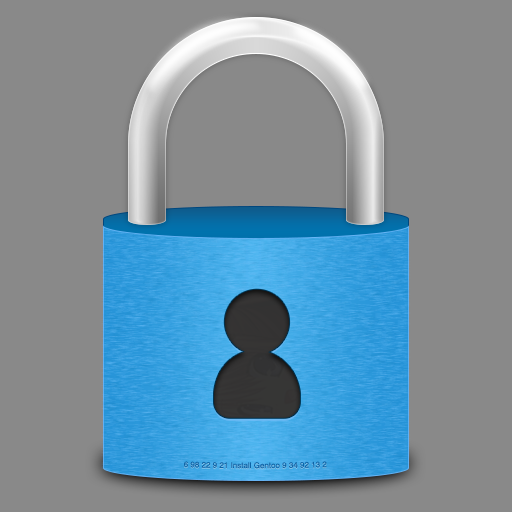
<style>
.page{position:relative;width:512px;height:512px;background:#898989}
.page>*{position:absolute;margin:0}
.t1{font:8px "Helvetica";color:#0c64a7}
</style>
<div class="page">
<p class="t1" style="left:184px;top:461px;width:143px;height:8px">6 98 22 9 21 Install Gentoo 9 34 92 13 2</p>
</div>
